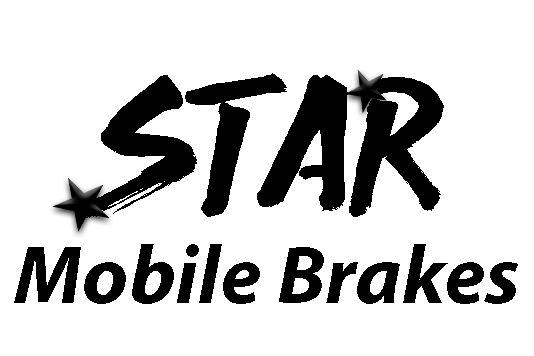
<style>
.page{position:relative;width:534px;height:356px;background:#ffffff}
.page>*{position:absolute;margin:0}
.t1{font:83.3px "MyriadPro-BoldIt";color:#000000}
.t2{font:191.7px "ExtraMile";color:#000000}
</style>
<div class="page">
<p class="t1" style="left:14px;top:73px;width:504px;height:231px;text-align:center"><span class="t2">STAR <br></span>Mobile Brakes</p>
</div>
